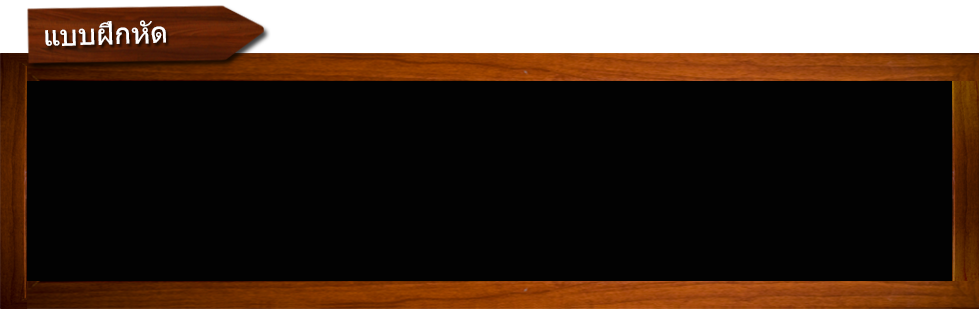
<style>
.page{position:relative;width:979px;height:309px;background:#020202}
.page>*{position:absolute;margin:0}
.t1{font:28.6px "Tahoma";color:#ffffff}
</style>
<div class="page">
<p class="t1" style="left:45px;top:20px;width:121px;height:26px;rotate:-2deg">แบบฝึกหัด</p>
</div>
